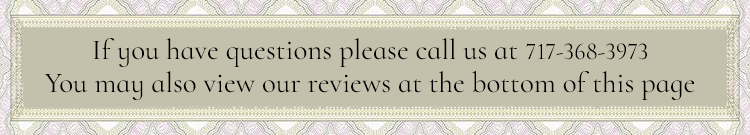
<style>
.page{position:relative;width:750px;height:135px;background:#c3c0ac}
.page>*{position:absolute;margin:0}
.t1{font:29px/33px "CormorantInfant-Regular";color:#000000}
.t2{font:24px/33px "CormorantInfant-Regular";color:#000000}
</style>
<div class="page">
<p class="t1" style="left:44px;top:38px;width:651px;height:63px;text-align:center">If you have questions please call us at <span class="t2">717-368-3973<br></span>You may also view our reviews at the bottom of this page</p>
</div>
